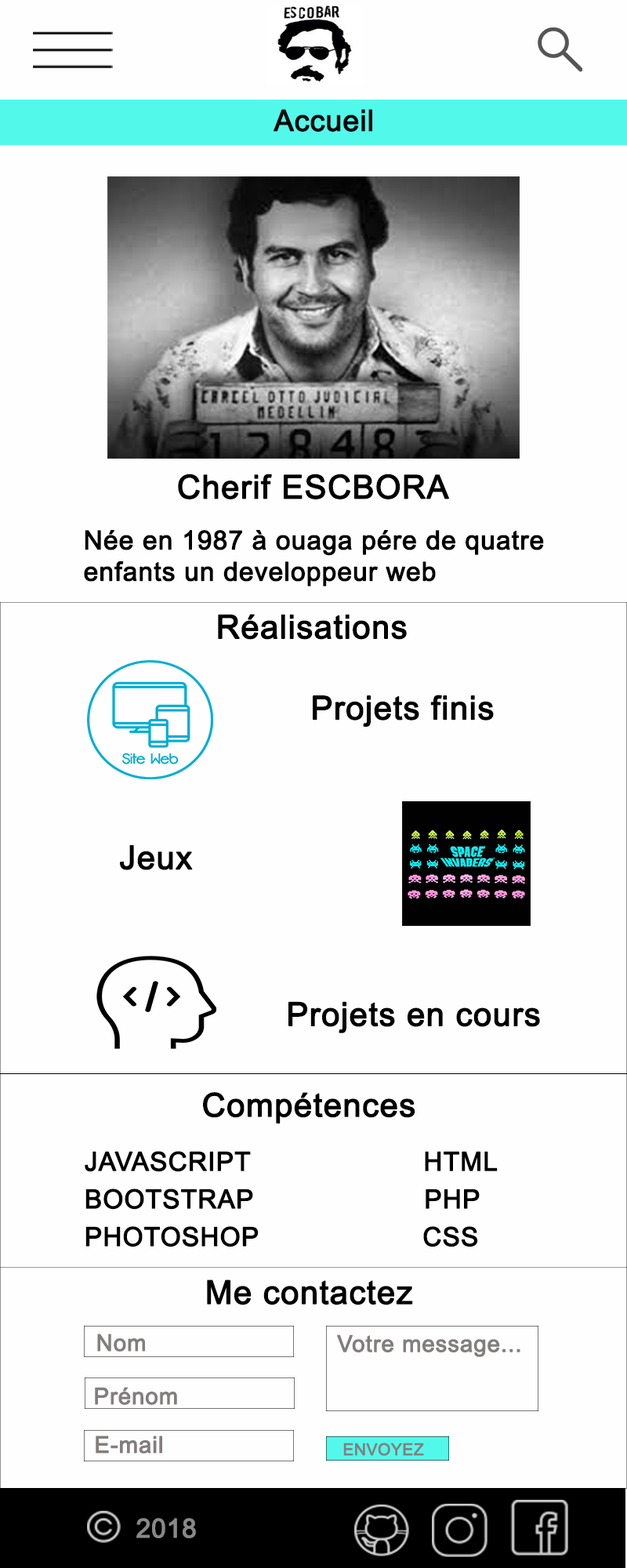
<style>
.page{position:relative;width:627px;height:1568px;background:#fefefe}
.page>*{position:absolute;margin:0}
.t1{font:29.4px "ArialMT";letter-spacing:0.002em;color:#080707;font-weight:bold}
.t2{font:32.7px "ArialMT";letter-spacing:0.01em;color:#000000;font-weight:bold}
.t3{font:26.1px "ArialMT";letter-spacing:0.01em;color:#000000;font-weight:bold}
.t4{font:22.9px "ArialMT";letter-spacing:0.01em;color:#837e7e;font-weight:bold}
.t5{font:16.3px "ArialMT";letter-spacing:0.002em;color:#837e7e;font-weight:bold}
.t6{font:26.1px "ArialMT";letter-spacing:0.002em;color:#888888;font-weight:bold}
</style>
<div class="page">
<p class="t1" style="left:274px;top:109px;width:98px;height:23px">Accueil</p>
<p class="t2" style="left:178px;top:474px;width:271px;height:25px">Cherif ESCBORA</p>
<p class="t3" style="left:84px;top:530px;width:460px;height:56px">Née en 1987 à ouaga pére de quatre <br>enfants un developpeur web</p>
<p class="t2" style="left:218px;top:614px;width:189px;height:26px">Réalisations</p>
<p class="t2" style="left:313px;top:695px;width:181px;height:32px">Projets finis</p>
<p class="t2" style="left:120px;top:845px;width:73px;height:25px">Jeux</p>
<p class="t2" style="left:289px;top:1001px;width:251px;height:32px">Projets en cours</p>
<p class="t2" style="left:203px;top:1092px;width:213px;height:31px">Compétences</p>
<p class="t3" style="left:85px;top:1151px;width:166px;height:21px">JAVASCRIPT</p>
<p class="t3" style="left:425px;top:1151px;width:73px;height:20px">HTML</p>
<p class="t3" style="left:85px;top:1189px;width:168px;height:21px">BOOTSTRAP</p>
<p class="t3" style="left:426px;top:1189px;width:54px;height:20px">PHP</p>
<p class="t3" style="left:85px;top:1226px;width:174px;height:21px">PHOTOSHOP</p>
<p class="t3" style="left:423px;top:1226px;width:55px;height:21px">CSS</p>
<p class="t2" style="left:207px;top:1279px;width:206px;height:26px">Me contactez</p>
<p class="t4" style="left:97px;top:1334px;width:48px;height:18px">Nom</p>
<p class="t4" style="left:337px;top:1334px;width:184px;height:23px">Votre message...</p>
<p class="t4" style="left:95px;top:1387px;width:82px;height:18px">Prénom</p>
<p class="t4" style="left:96px;top:1436px;width:66px;height:18px">E-mail</p>
<p class="t5" style="left:343px;top:1443px;width:81px;height:13px">ENVOYEZ</p>
<p class="t6" style="left:136px;top:1518px;width:60px;height:20px">2018</p>
</div>
